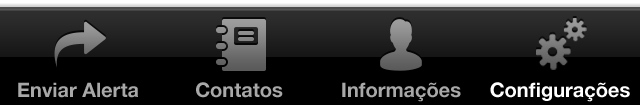
<style>
.page{position:relative;width:640px;height:105px;background:#000000}
.page>*{position:absolute;margin:0}
.t1{font:20px "HelveticaNeue-Bold";color:#a8a8a8}
.t2{font:20px "HelveticaNeue-Bold";color:#ffffff}
</style>
<div class="page">
<p class="t1" style="left:18px;top:82px;width:120px;height:16px">Enviar Alerta</p>
<p class="t1" style="left:196px;top:82px;width:87px;height:16px">Contatos</p>
<p class="t1" style="left:342px;top:82px;width:119px;height:20px">Informações</p>
<p class="t2" style="left:490px;top:82px;width:140px;height:20px">Configurações</p>
</div>
